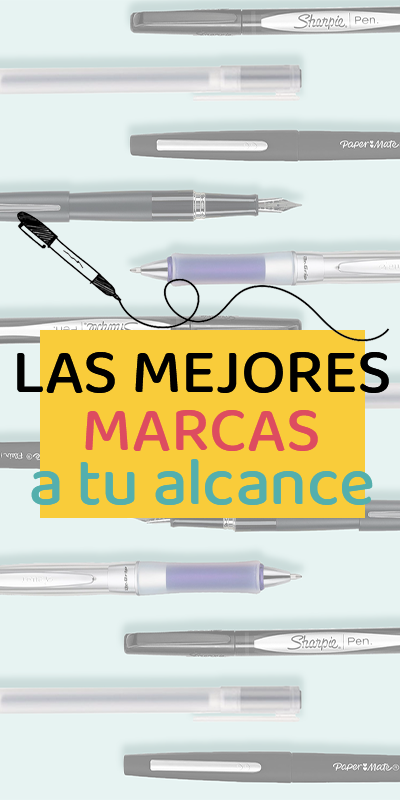
<style>
.page{position:relative;width:400px;height:800px;background:#e7f3f2}
.page>*{position:absolute;margin:0}
.t1{font:65.1px "BalooPaaji2-Medium";letter-spacing:-0.01em;color:#000000}
.t2{font:65.1px "BalooPaaji2-Medium";letter-spacing:-0.01em;color:#dd4c60}
.t3{font:67.5px "BalooPaaji2-Medium";letter-spacing:-0.01em;color:#54afad}
</style>
<div class="page">
<p class="t1" style="left:17px;top:352px;width:372px;height:41px">LAS MEJORES</p>
<p class="t2" style="left:85px;top:410px;width:233px;height:41px">MARCAS</p>
<p class="t3" style="left:31px;top:459px;width:342px;height:46px">a tu alcance</p>
</div>
